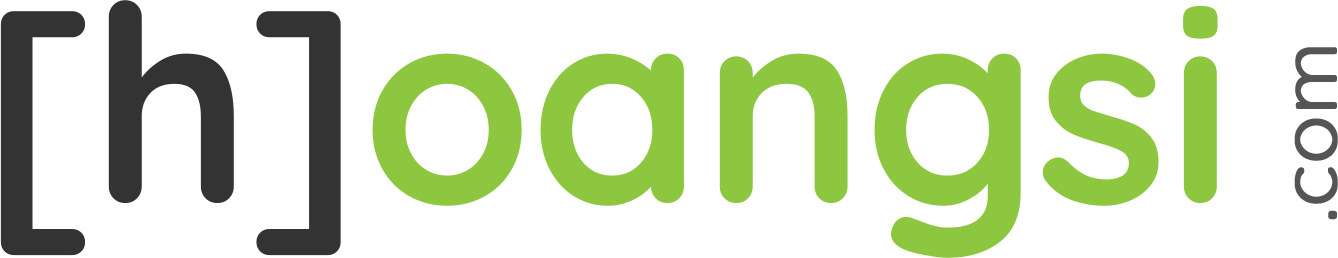
<style>
.page{position:relative;width:1338px;height:258px;background:#ffffff}
.page>*{position:absolute;margin:0}
.t1{font:274px "Quicksand-Bold";color:#8dc73f}
.t2{font:274px "Quicksand-Bold";color:#333333}
.t3{font:79px "Quicksand-Regular";color:#555555;font-weight:bold}
</style>
<div class="page">
<p class="t1" style="left:0px;top:0px;width:1218px;height:258px"><span class="t2">[h]</span>oangsi</p>
<p class="t3" style="left:1294px;top:47px;width:44px;height:173px;rotate:-90deg">.com</p>
</div>
